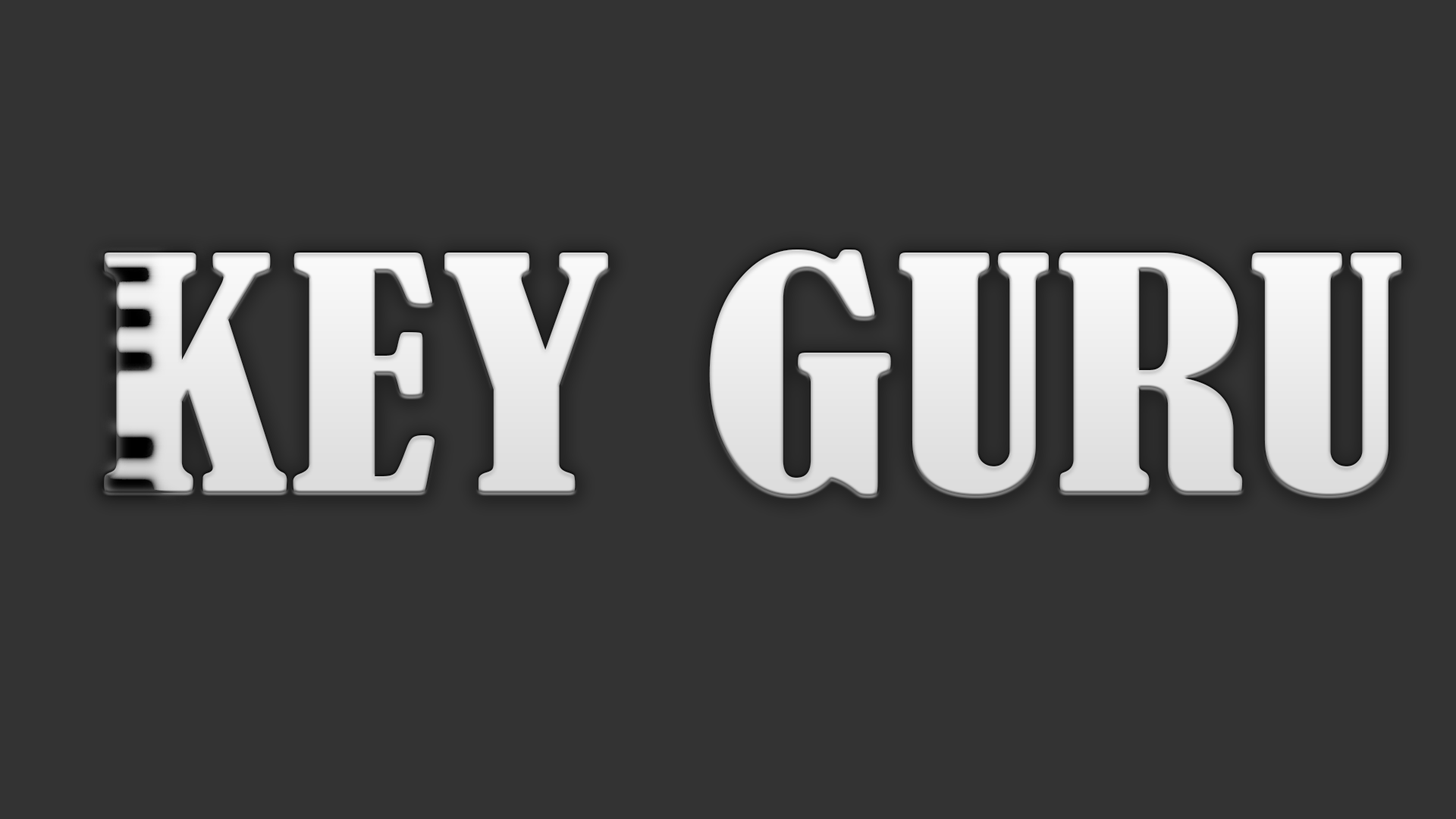
<style>
.page{position:relative;width:1456px;height:819px;background:#333333}
.page>*{position:absolute;margin:0}
.t1{font:304.6px "BernardMT-Condensed";color:#e7e7e7;scale:1.18 1}
</style>
<div class="page">
<p class="t1" style="left:104px;top:249px;width:1297px;height:247px">KEY GURU</p>
</div>
